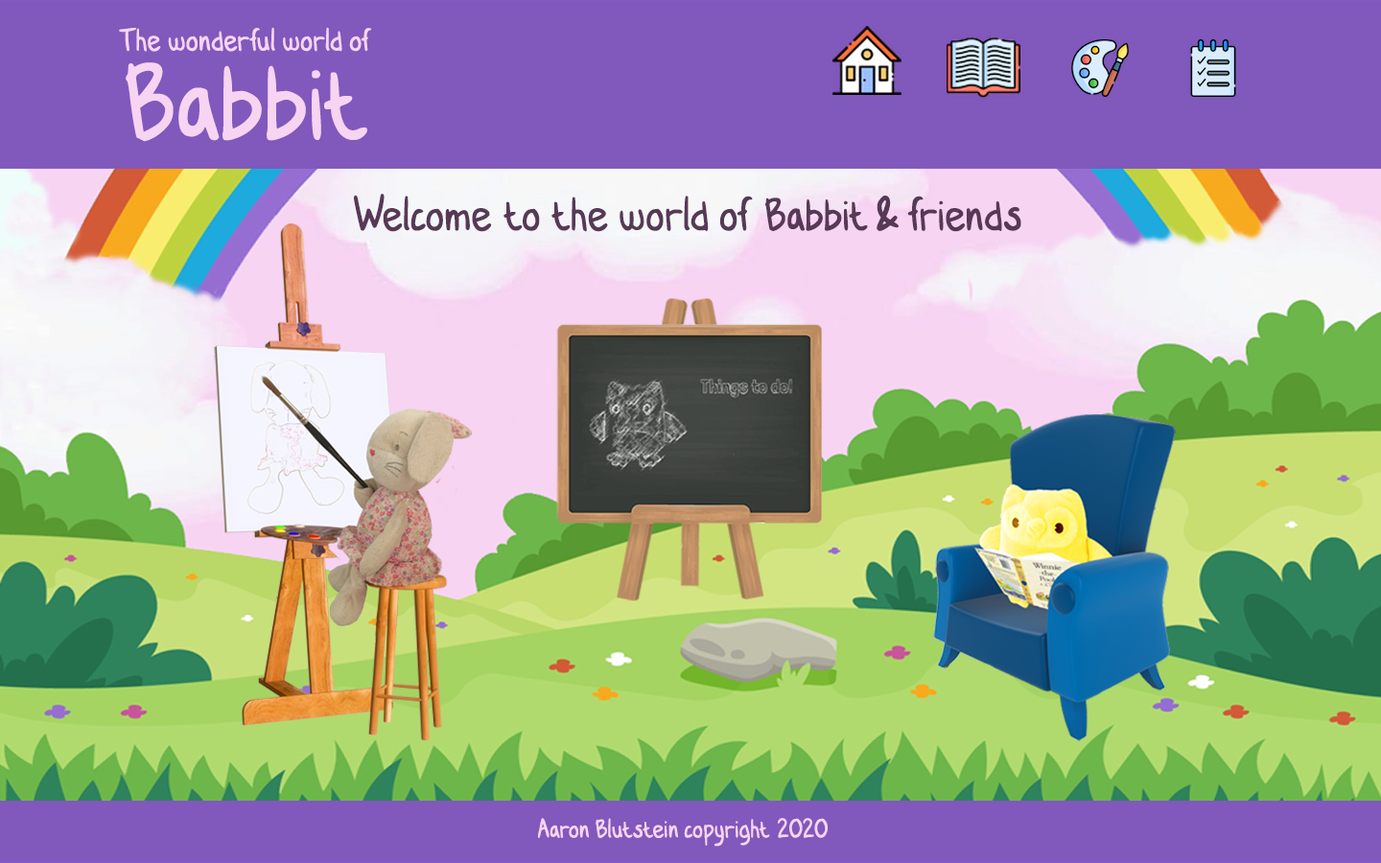
<style>
.page{position:relative;width:1381px;height:863px;background:#8158bc}
.page>*{position:absolute;margin:0}
.t1{font:46px "MyKidsHandwrittenBasic";color:#f7d4f2}
.t2{font:163.1px "MyKidsHandwrittenBasic";color:#f7d4f2}
.t3{font:69.1px "MyKidsHandwrittenBasic";color:#573957}
.t4{font:38.4px "MyKidsHandwrittenBasic";color:#f7d4f2}
</style>
<div class="page">
<p class="t1" style="left:119px;top:27px;width:253px;height:25px">The wonderful world of</p>
<p class="t2" style="left:126px;top:62px;width:241px;height:80px">Babbit</p>
<p class="t3" style="left:354px;top:194px;width:668px;height:38px">Welcome to the world of Babbit &amp; friends</p>
<p class="t4" style="left:538px;top:818px;width:290px;height:29px">Aaron Blutstein copyright  2020</p>
</div>
